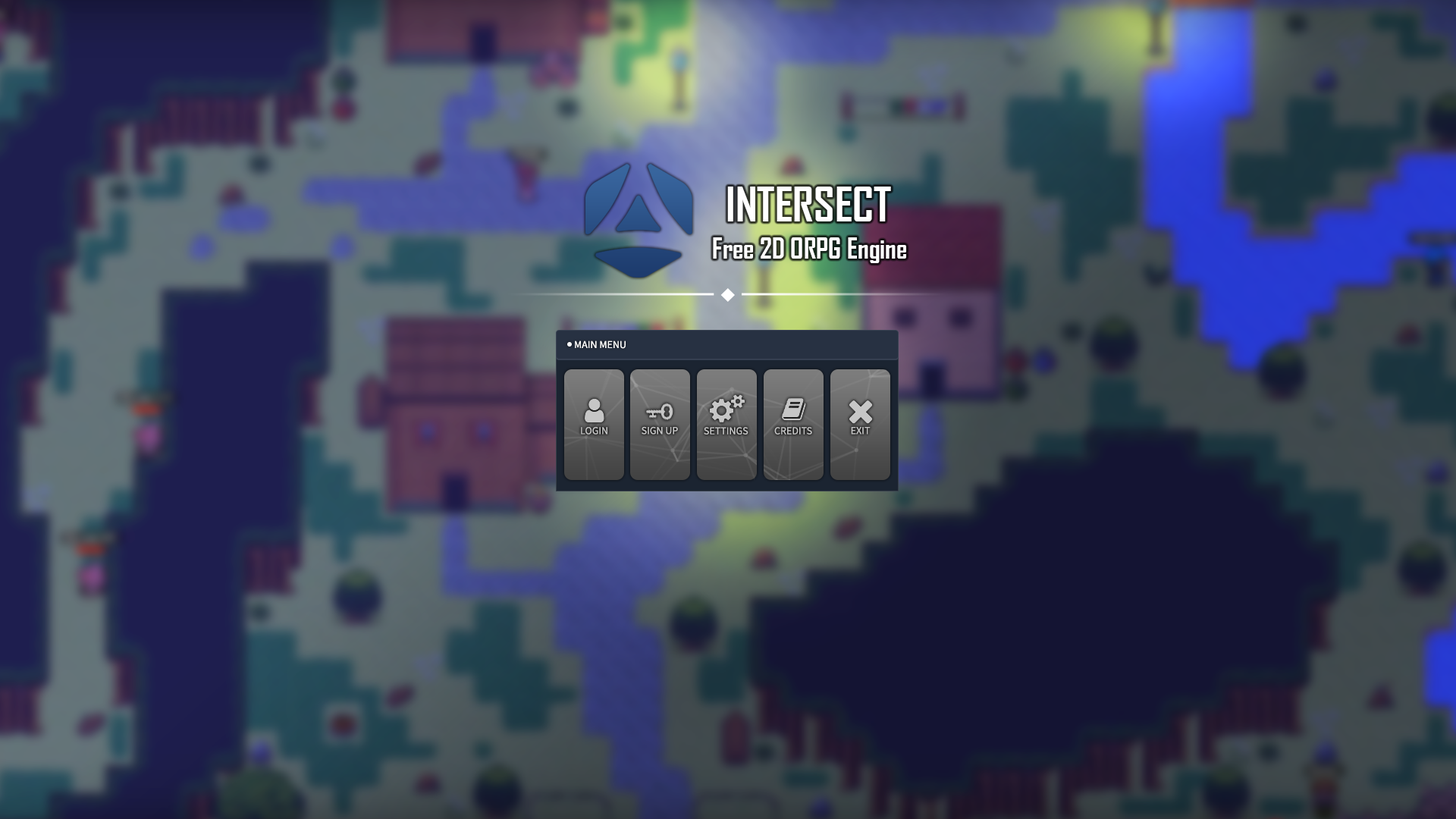
<style>
.page{position:relative;width:1456px;height:819px}
.page>*{position:absolute;margin:0}
.t1{font:45.5px "AgencyFB-Bold";color:#ffffff}
.t2{font:27.3px "AgencyFB-Bold";color:#ffffff}
.t3{font:10.6px "SourceSansPro-Regular";color:#ffffff;text-transform:uppercase}
.t4{font:10.6px "SourceSansPro-Regular";color:#c6c6c6;text-transform:uppercase}
</style>
<div class="page">
<p class="t1" style="left:727px;top:187px;width:164px;height:34px">INTERSECT</p>
<p class="t2" style="left:713px;top:237px;width:193px;height:26px">Free 2D ORPG Engine</p>
<p class="t3" style="left:575px;top:340px;width:51px;height:9px">Main menu</p>
<p class="t4" style="left:581px;top:427px;width:26px;height:8px">LOGIN</p>
<p class="t4" style="left:642px;top:426px;width:36px;height:9px">Sign up</p>
<p class="t4" style="left:704px;top:427px;width:44px;height:8px">Settings</p>
<p class="t4" style="left:774px;top:427px;width:38px;height:8px">CREDITS</p>
<p class="t4" style="left:851px;top:427px;width:20px;height:8px">exit</p>
</div>
